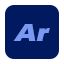
<style>
.page{position:relative;width:64px;height:64px;background:#00195f}
.page>*{position:absolute;margin:0}
.t1{font:24px "AkzidenzGroteskBQ-BoldExtIt";color:#7999f3}
</style>
<div class="page">
<p class="t1" style="left:13px;top:24px;width:37px;height:17px">Ar</p>
</div>
